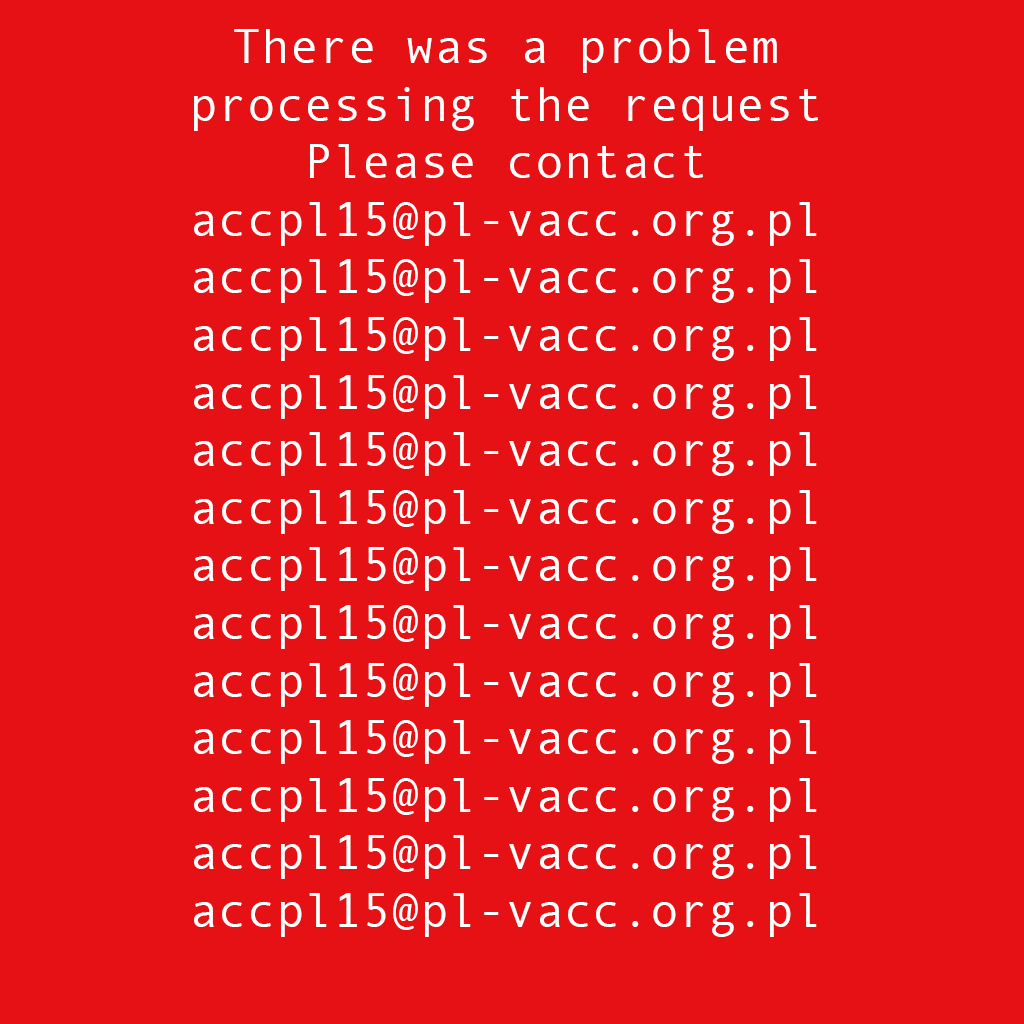
<style>
.page{position:relative;width:1024px;height:1024px;background:#e51114}
.page>*{position:absolute;margin:0}
.t1{font:48px "EuroScope";color:#ffffff}
</style>
<div class="page">
<p class="t1" style="left:194px;top:29px;width:624px;height:908px;text-align:center">There was a problem<br>processing the request<br>Please contact<br>accpl15@pl-vacc.org.pl<br>accpl15@pl-vacc.org.pl<br>accpl15@pl-vacc.org.pl<br>accpl15@pl-vacc.org.pl<br>accpl15@pl-vacc.org.pl<br>accpl15@pl-vacc.org.pl<br>accpl15@pl-vacc.org.pl<br>accpl15@pl-vacc.org.pl<br>accpl15@pl-vacc.org.pl<br>accpl15@pl-vacc.org.pl<br>accpl15@pl-vacc.org.pl<br>accpl15@pl-vacc.org.pl<br>accpl15@pl-vacc.org.pl</p>
</div>
